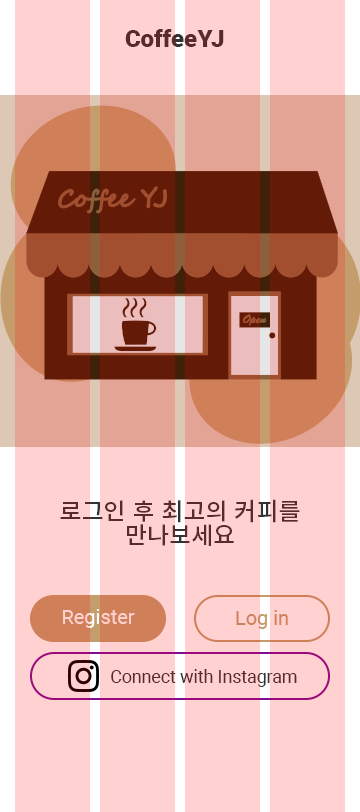
<style>
.page{position:relative;width:360px;height:812px;background:#ffd1d1}
.page>*{position:absolute;margin:0}
.t1{font:24px "Roboto-Black";color:#582a2a}
.t2{font:24px/24px "NotoSansKR-Medium";color:#582a2a}
.t3{font:20px "Roboto-Regular";color:#ffd1d1}
.t4{font:20px "Roboto-Regular";color:#cf8059}
.t5{font:18px "Roboto-Regular";color:#582a2a}
</style>
<div class="page">
<p class="t1" style="left:125px;top:29px;width:99px;height:18px">CoffeeYJ</p>
<p class="t2" style="left:60px;top:499px;width:240px;height:47px;text-align:center">로그인 후 최고의 커피를<br>만나보세요</p>
<p class="t3" style="left:63px;top:609px;width:72px;height:19px">Register</p>
<p class="t4" style="left:236px;top:610px;width:52px;height:19px">Log in</p>
<p class="t5" style="left:111px;top:669px;width:186px;height:18px">Connect with Instagram</p>
</div>
